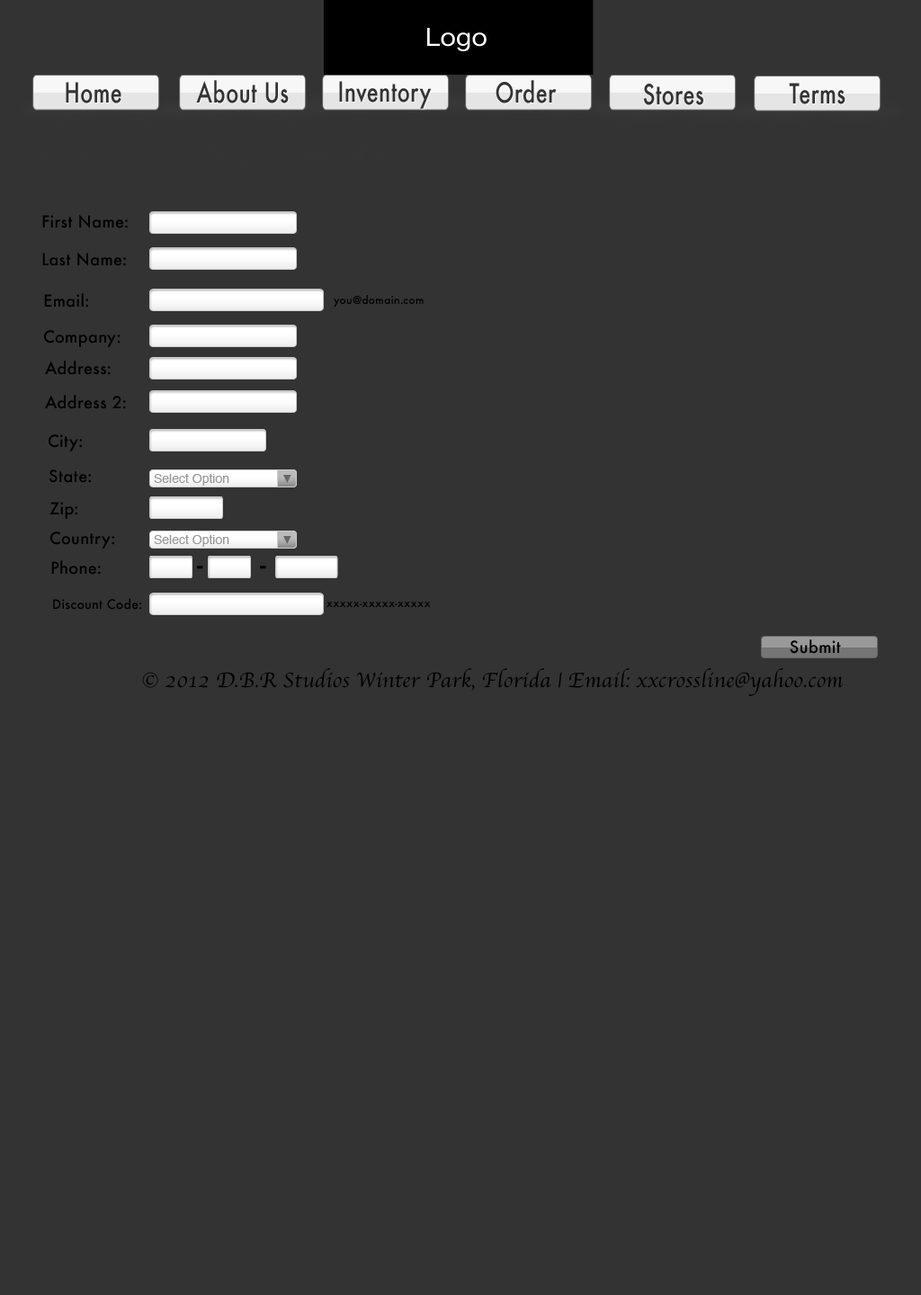
<style>
.page{position:relative;width:921px;height:1295px;background:#333333}
.page>*{position:absolute;margin:0}
.t1{font:25.2px "HelveticaNeue";letter-spacing:0.01em;color:#ffffff;scale:1.07 1}
.t2{font:27px "Futura-Medium";letter-spacing:0.02em;color:#333333;scale:0.78 1}
.t3{font:16.2px "Futura-Medium";letter-spacing:0.02em;color:#000000}
.t4{font:10.8px "Futura-Medium";letter-spacing:0.02em;color:#000000}
.t5{font:27px "Futura-Medium";letter-spacing:0.02em;color:#000000}
.t6{font:12.6px "Futura-Medium";letter-spacing:0.02em;color:#000000}
.t7{font:21.6px "Apple-Chancery";letter-spacing:0.01em;color:#000000}
</style>
<div class="page">
<p class="t1" style="left:427px;top:28px;width:60px;height:23px">Logo</p>
<p class="t2" style="left:66px;top:82px;width:55px;height:21px">Home</p>
<p class="t2" style="left:196px;top:80px;width:93px;height:23px">About Us</p>
<p class="t2" style="left:339px;top:81px;width:93px;height:28px">Inventory</p>
<p class="t2" style="left:495px;top:80px;width:62px;height:23px">Order</p>
<p class="t2" style="left:643px;top:84px;width:60px;height:21px">Stores</p>
<p class="t2" style="left:789px;top:83px;width:56px;height:21px">Terms</p>
<p class="t3" style="left:42px;top:214px;width:86px;height:14px">First Name:</p>
<p class="t3" style="left:42px;top:252px;width:84px;height:14px">Last Name:</p>
<p class="t3" style="left:44px;top:293px;width:44px;height:15px">Email:</p>
<p class="t4" style="left:334px;top:295px;width:90px;height:12px">you@domain.com</p>
<p class="t3" style="left:44px;top:330px;width:77px;height:17px">Company:</p>
<p class="t3" style="left:45px;top:361px;width:66px;height:14px">Address:</p>
<p class="t3" style="left:45px;top:395px;width:81px;height:14px">Address 2:</p>
<p class="t3" style="left:49px;top:434px;width:33px;height:17px">City:</p>
<p class="t3" style="left:49px;top:469px;width:42px;height:14px">State:</p>
<p class="t3" style="left:49px;top:502px;width:28px;height:17px">Zip:</p>
<p class="t3" style="left:50px;top:531px;width:64px;height:18px">Country:</p>
<p class="t3" style="left:51px;top:560px;width:50px;height:15px">Phone:</p>
<p class="t5" style="left:197px;top:566px;width:6px;height:3px">-</p>
<p class="t5" style="left:260px;top:566px;width:6px;height:3px">-</p>
<p class="t6" style="left:53px;top:598px;width:89px;height:12px">Discount Code:</p>
<p class="t4" style="left:326px;top:602px;width:105px;height:5px">xxxxx-xxxxx-xxxxx</p>
<p class="t3" style="left:790px;top:639px;width:51px;height:15px">Submit</p>
<p class="t7" style="left:142px;top:668px;width:701px;height:28px">© 2012 D.B.R Studios Winter Park, Florida | Email: xxcrossline@yahoo.com</p>
</div>
